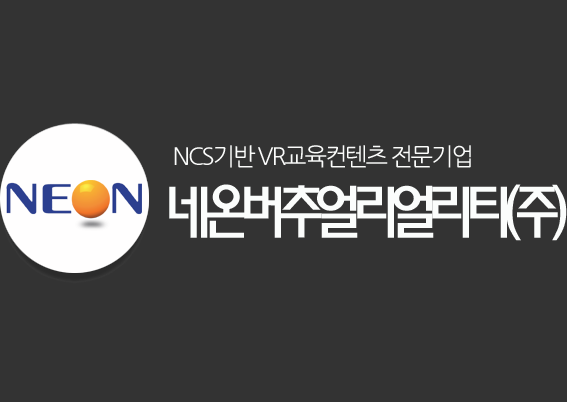
<style>
.page{position:relative;width:567px;height:402px;background:#333333}
.page>*{position:absolute;margin:0}
.t1{font:24px "NanumGothic";letter-spacing:-0.093em;color:#fbfcfb}
.t2{font:58px "MoeumTR-HM";letter-spacing:-0.173em;color:#fbfdfc}
</style>
<div class="page">
<p class="t1" style="left:174px;top:145px;width:297px;height:23px">NCS기반 VR교육컨텐츠 전문기업</p>
<p class="t2" style="left:169px;top:184px;width:398px;height:57px">네온버추얼리얼리티(주)</p>
</div>
